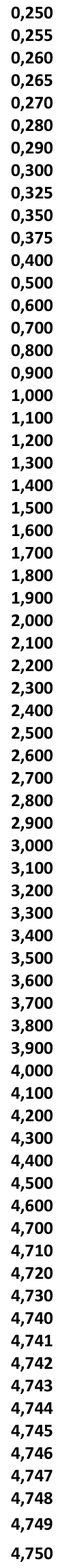
<style>
.page{position:relative;width:58px;height:1568px;background:#ffffff}
.page>*{position:absolute;margin:0}
.t1{font:18.4px/22.5px "Calibri-Bold";color:#000000}
.t2{font:18.4px/25.9px "Calibri-Bold";color:#000000}
.t3{font:18.4px/29.3px "Calibri-Bold";color:#000000}
</style>
<div class="page">
<p class="t1" style="left:11px;top:6px;width:42px;height:1556px;text-align:right">0,250<br>0,255<br>0,260<br>0,265<br>0,270<br>0,280<br>0,290<br>0,300<br>0,325<br>0,350<br>0,375<br>0,400<br>0,500<br>0,600<br>0,700<br>0,800<br>0,900<br>1,000<br>1,100<br>1,200<br>1,300<br>1,400<br>1,500<br>1,600<br>1,700<br>1,800<br>1,900<br>2,000<br>2,100<br>2,200<br>2,300<br>2,400<br>2,500<br>2,600<br>2,700<br>2,800<br>2,900<br>3,000<br>3,100<br>3,200<br>3,300<br>3,400<br>3,500<br>3,600<br>3,700<br>3,800<br>3,900<br>4,000<br>4,100<br>4,200<br>4,300<br>4,400<br>4,500<br>4,600<br>4,700<br>4,710<br>4,720<br>4,730<br>4,740<br>4,741<br>4,742<br>4,743<br>4,744<br>4,745<br>4,746<br>4,747<br>4,748<br><span class="t2">4,749<br></span><span class="t3">4,750</span></p>
</div>
